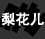
<style>
.page{position:relative;width:45px;height:39px;background:#333333}
.page>*{position:absolute;margin:0}
.t1{font:14px "SimHei";color:#ffffff;font-weight:bold}
</style>
<div class="page">
<p class="t1" style="left:1px;top:12px;width:43px;height:14px">梨花儿</p>
</div>
